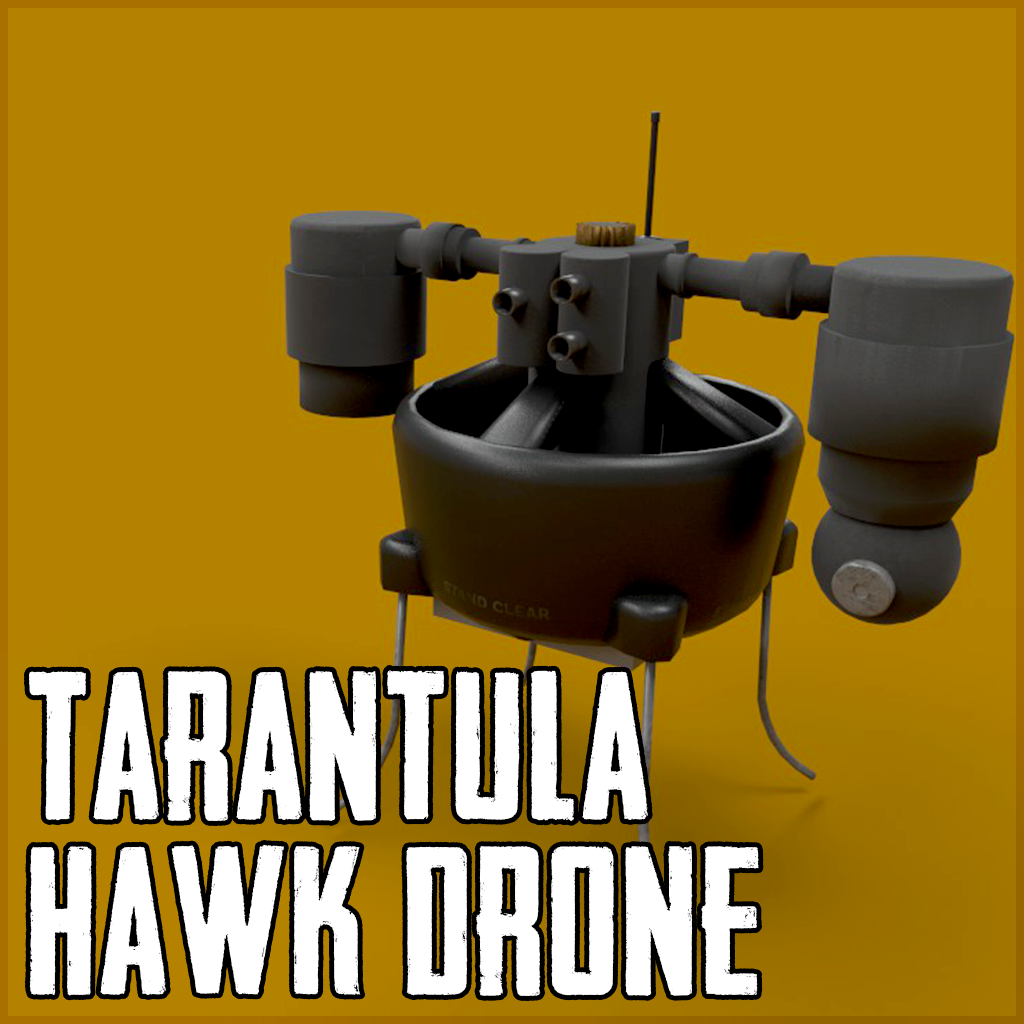
<style>
.page{position:relative;width:1024px;height:1024px;background:#b48200}
.page>*{position:absolute;margin:0}
.t1{font:200px/175px "HeadlinerNo.45";letter-spacing:0.025em;color:#ffffff}
</style>
<div class="page">
<p class="t1" style="left:28px;top:669px;width:731px;height:327px">Tarantula<br>Hawk drone</p>
</div>
